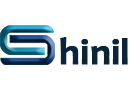
<style>
.page{position:relative;width:129px;height:90px;background:#ffffff}
.page>*{position:absolute;margin:0}
.t1{font:38px "BerlinSansFB-Reg";color:#0b2438;font-weight:bold}
</style>
<div class="page">
<p class="t1" style="left:60px;top:37px;width:68px;height:28px">hinil</p>
</div>
